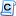
<style>
.page{position:relative;width:16px;height:16px}
.page>*{position:absolute;margin:0}
.t1{font:9px "ArialMT";color:#000000;font-weight:bold;scale:1.18 1}
</style>
<div class="page">
<p class="t1" style="left:4px;top:3px;width:7px;height:8px">C</p>
</div>
